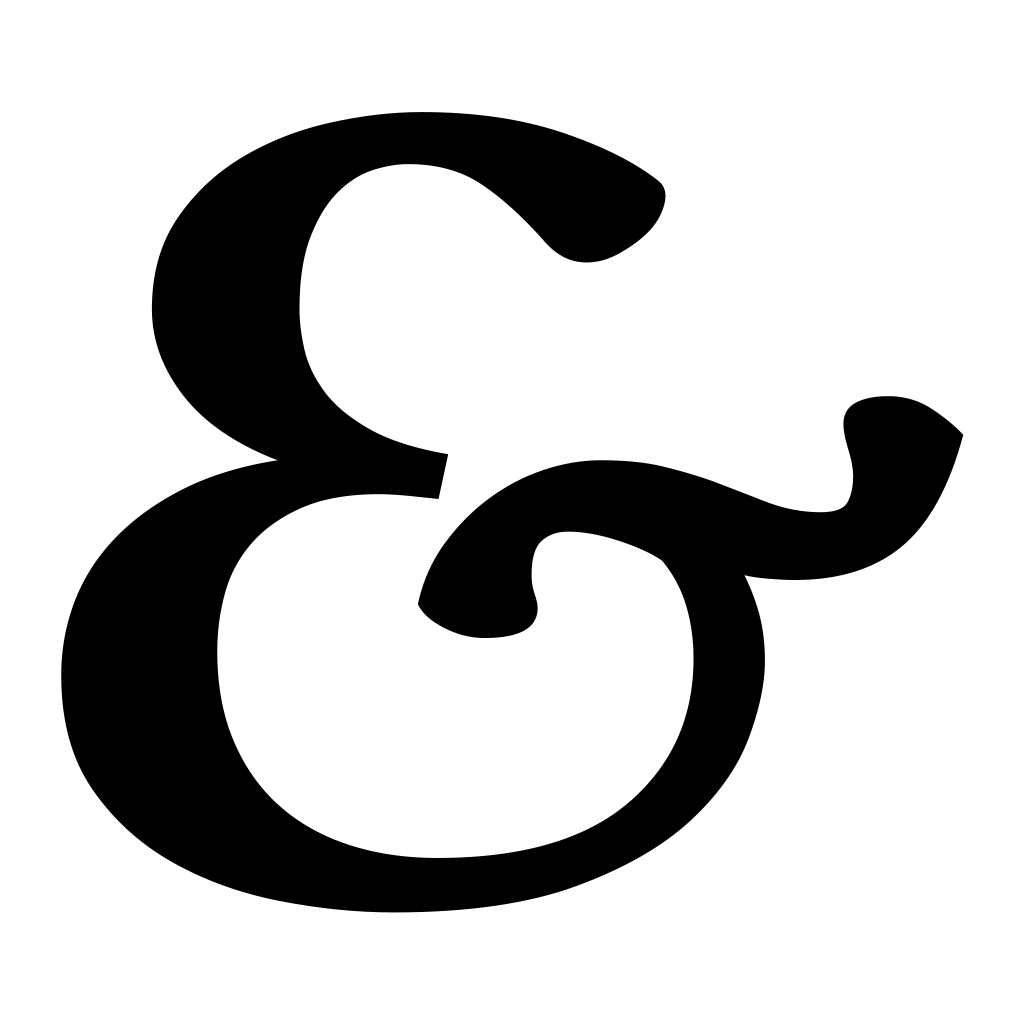
<style>
.page{position:relative;width:1024px;height:1024px;background:#ffffff}
.page>*{position:absolute;margin:0}
.t1{font:1208.9px "Athelas-BoldItalic";color:#000000}
</style>
<div class="page">
<p class="t1" style="left:61px;top:112px;width:903px;height:801px">&amp;</p>
</div>
